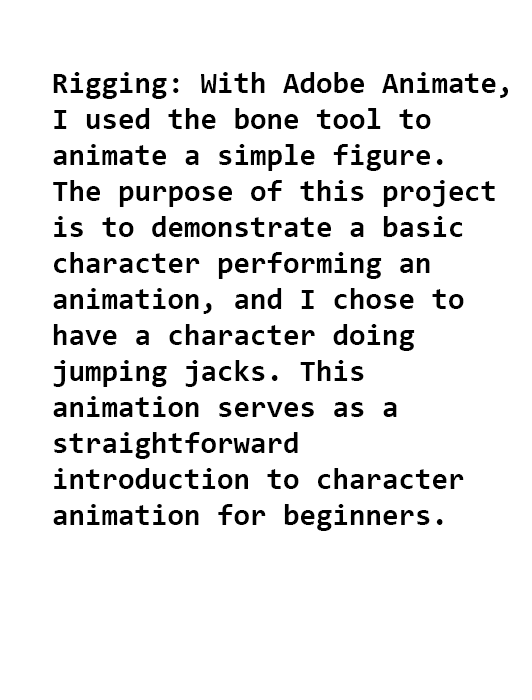
<style>
.page{position:relative;width:532px;height:700px;background:#ffffff}
.page>*{position:absolute;margin:0}
.t1{font:30px "Consolas-Bold";color:#000000}
</style>
<div class="page">
<p class="t1" style="left:53px;top:72px;width:455px;height:459px">Rigging: With Adobe Animate,<br>I used the bone tool to <br>animate a simple figure. <br>The purpose of this project <br>is to demonstrate a basic <br>character performing an <br>animation, and I chose to <br>have a character doing <br>jumping jacks. This <br>animation serves as a <br>straightforward <br>introduction to character <br>animation for beginners.</p>
</div>
